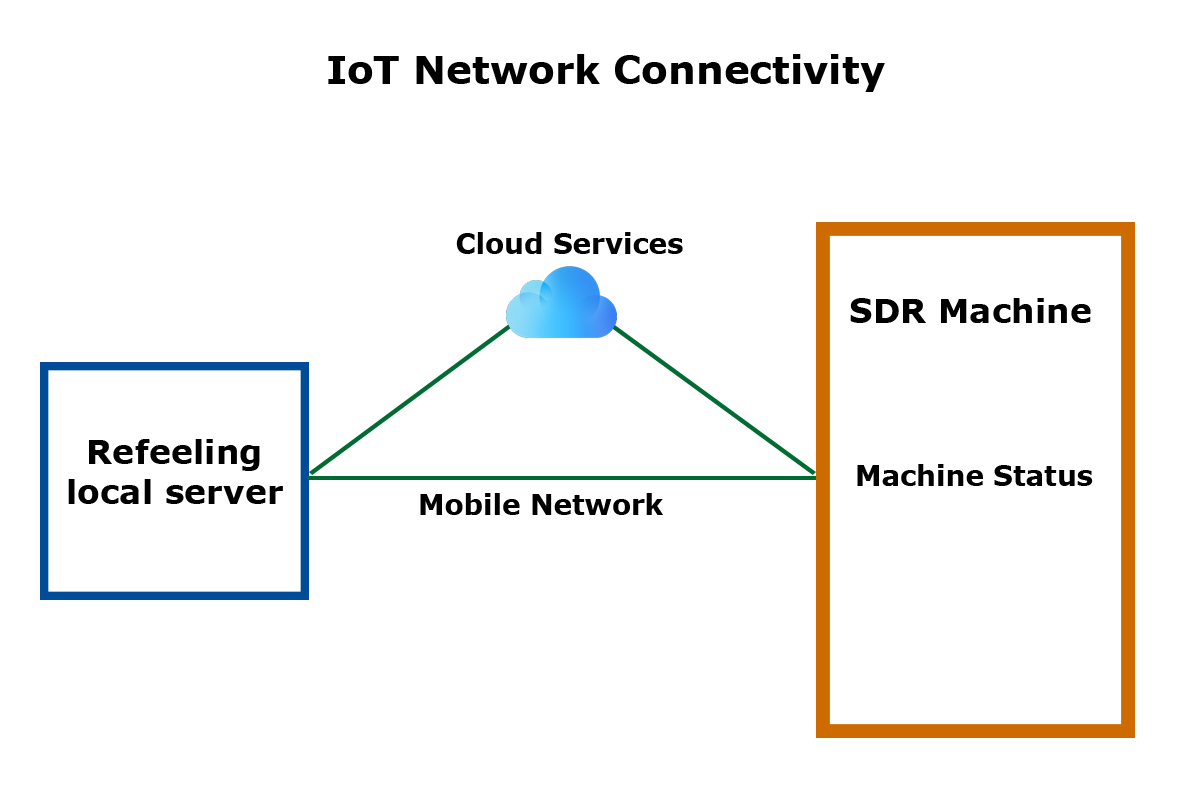
<style>
.page{position:relative;width:1196px;height:792px;background:#ffffff}
.page>*{position:absolute;margin:0}
.t1{font:38.9px "Verdana-Bold";color:#000000}
.t2{font:27.8px "Verdana-Bold";color:#000000}
.t3{font:12px "Verdana-Bold";color:#000000}
.t4{font:33.3px "Verdana-Bold";color:#000000}
</style>
<div class="page">
<p class="t1" style="left:328px;top:54px;width:557px;height:38px">IoT Network Connectivity</p>
<p class="t2" style="left:456px;top:232px;width:227px;height:22px">Cloud Services</p>
<p class="t3" style="left:850px;top:298px;width:241px;height:25px">SDR Machine</p>
<p class="t4" style="left:68px;top:439px;width:215px;height:65px;text-align:center">Refeeling<br>local server</p>
<p class="t2" style="left:857px;top:464px;width:236px;height:22px">Machine Status</p>
<p class="t2" style="left:420px;top:493px;width:243px;height:22px">Mobile Network</p>
</div>
